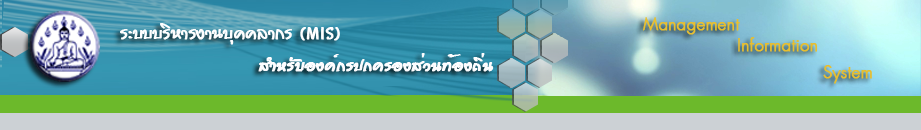
<style>
.page{position:relative;width:921px;height:130px}
.page>*{position:absolute;margin:0}
.t1{font:24px "PSLPrathom";color:#e8bf31;font-weight:bold}
.t2{font:24px "PSLPrathom";color:#e7be30;font-weight:bold}
.t3{font:22px "PSLPassanun";color:#fdfdff;font-weight:bold}
</style>
<div class="page">
<p class="t1" style="left:643px;top:17px;width:97px;height:18px">Management</p>
<p class="t2" style="left:738px;top:37px;width:80px;height:15px">Information</p>
<p class="t3" style="left:258px;top:53px;width:236px;height:19px">สำหรับองค์กรปกครองส่วนท้องถิ่น</p>
<p class="t2" style="left:823px;top:65px;width:49px;height:19px">System</p>
</div>
